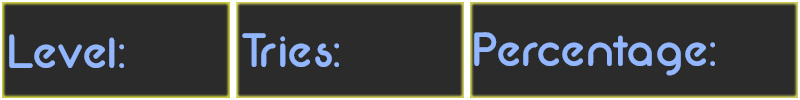
<style>
.page{position:relative;width:800px;height:100px;background:#2b2b2b}
.page>*{position:absolute;margin:0}
.t1{font:48px "Neon80s";color:#92b6ff}
</style>
<div class="page">
<p class="t1" style="left:9px;top:34px;width:115px;height:34px">Level:</p>
<p class="t1" style="left:242px;top:33px;width:97px;height:34px">Tries:</p>
<p class="t1" style="left:474px;top:32px;width:241px;height:44px">Percentage:</p>
</div>
